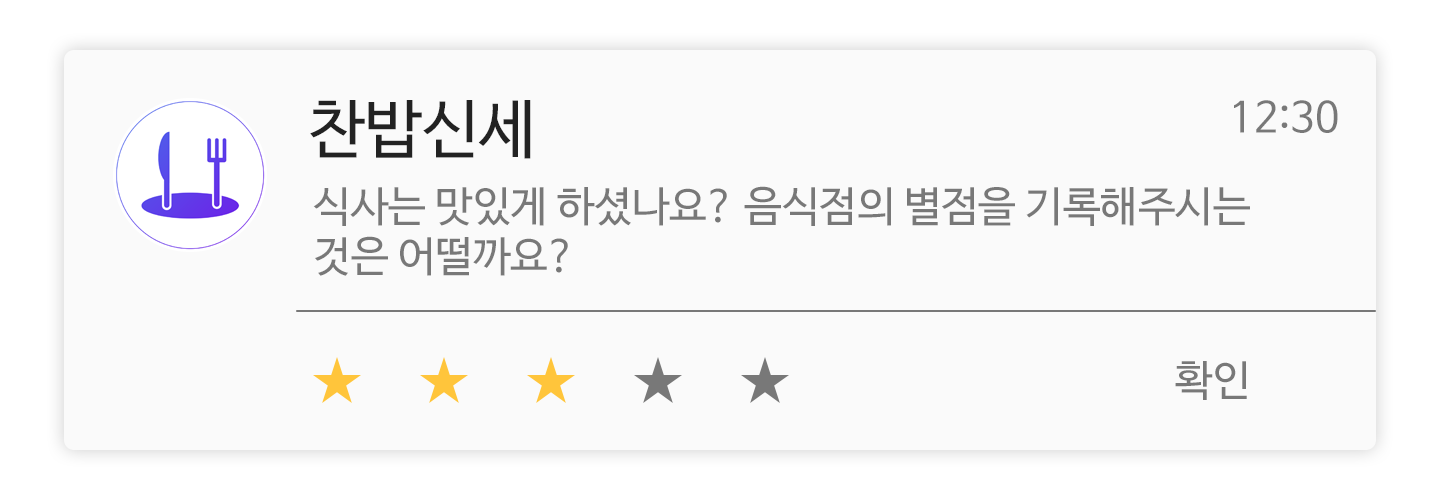
<style>
.page{position:relative;width:1440px;height:500px;background:#fafafa}
.page>*{position:absolute;margin:0}
.t1{font:64px "NanumBarunGothic";color:#222222}
.t2{font:41.7px "NanumBarunGothic";color:#787878}
.t3{font:42px "NanumBarunGothic";color:#787878}
</style>
<div class="page">
<p class="t1" style="left:310px;top:100px;width:221px;height:59px">찬밥신세</p>
<p class="t2" style="left:1234px;top:100px;width:104px;height:33px">12:30</p>
<p class="t3" style="left:313px;top:186px;width:937px;height:90px">식사는 맛있게 하셨나요? 음식점의 별점을 기록해주시는<br>것은 어떨까요?</p>
<p class="t3" style="left:1175px;top:361px;width:72px;height:39px">확인</p>
</div>
